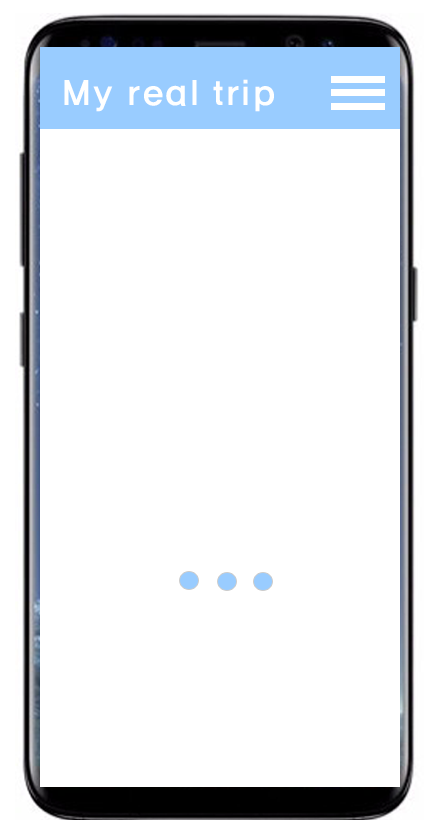
<style>
.page{position:relative;width:440px;height:820px;background:#ffffff}
.page>*{position:absolute;margin:0}
.t1{font:36px "HaanYGodic24";color:#ffffff}
</style>
<div class="page">
<p class="t1" style="left:64px;top:79px;width:210px;height:33px">My real trip</p>
</div>
